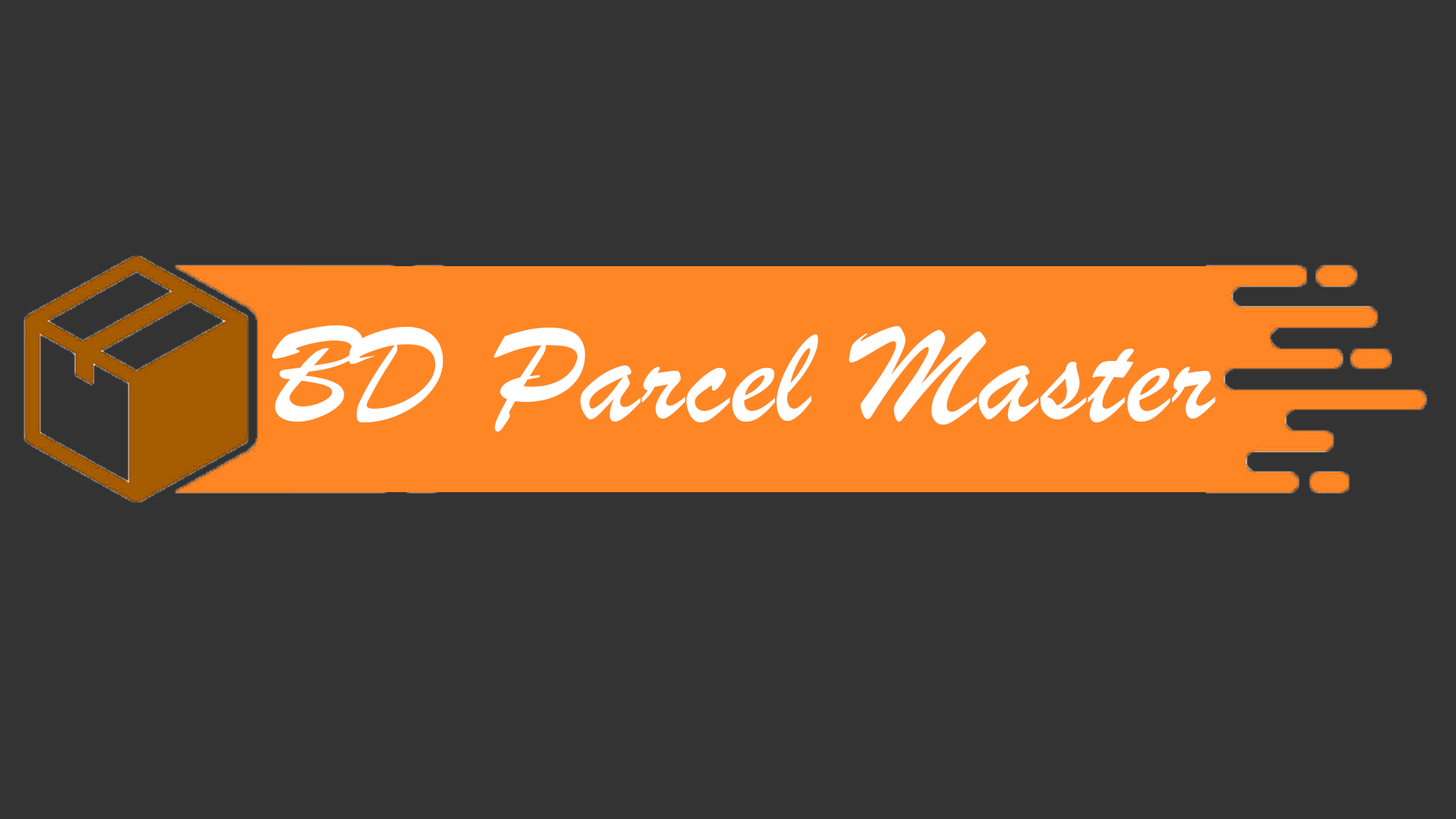
<style>
.page{position:relative;width:1456px;height:819px;background:#333333}
.page>*{position:absolute;margin:0}
.t1{font:144.1px "BrushScriptMT";letter-spacing:0.02em;color:#ffffff}
</style>
<div class="page">
<p class="t1" style="left:272px;top:325px;width:944px;height:106px">BD Parcel Master</p>
</div>
